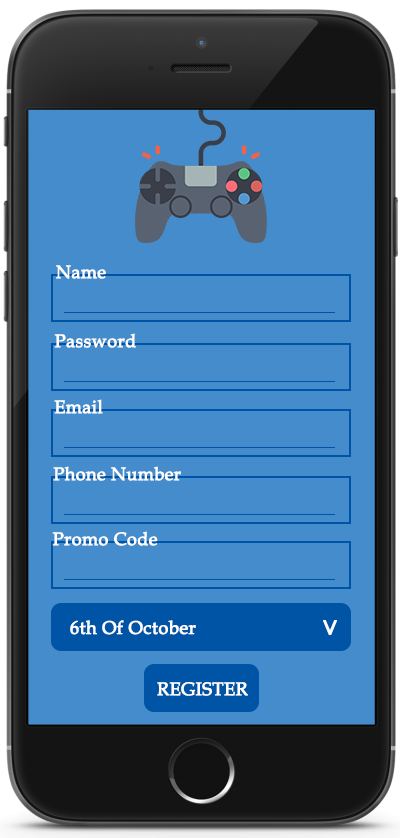
<style>
.page{position:relative;width:400px;height:838px;background:#448ccb}
.page>*{position:absolute;margin:0}
.t1{font:18px "BookAntiqua";color:#ffffff;font-weight:bold}
.t2{font:18.2px "BookAntiqua";color:#ffffff;font-weight:bold}
.t3{font:25.9px "BookAntiqua";color:#ffffff;font-weight:bold;scale:1.1 1}
</style>
<div class="page">
<p class="t1" style="left:56px;top:265px;width:50px;height:14px">Name</p>
<p class="t1" style="left:54px;top:333px;width:82px;height:15px">Password</p>
<p class="t1" style="left:54px;top:399px;width:49px;height:15px">Email</p>
<p class="t1" style="left:53px;top:466px;width:128px;height:15px">Phone Number</p>
<p class="t1" style="left:52px;top:531px;width:106px;height:15px">Promo Code</p>
<p class="t2" style="left:70px;top:620px;width:126px;height:15px">6th Of October</p>
<p class="t3" style="left:323px;top:620px;width:14px;height:15px;rotate:-90deg">&lt;</p>
<p class="t2" style="left:157px;top:682px;width:91px;height:14px">REGISTER</p>
</div>
